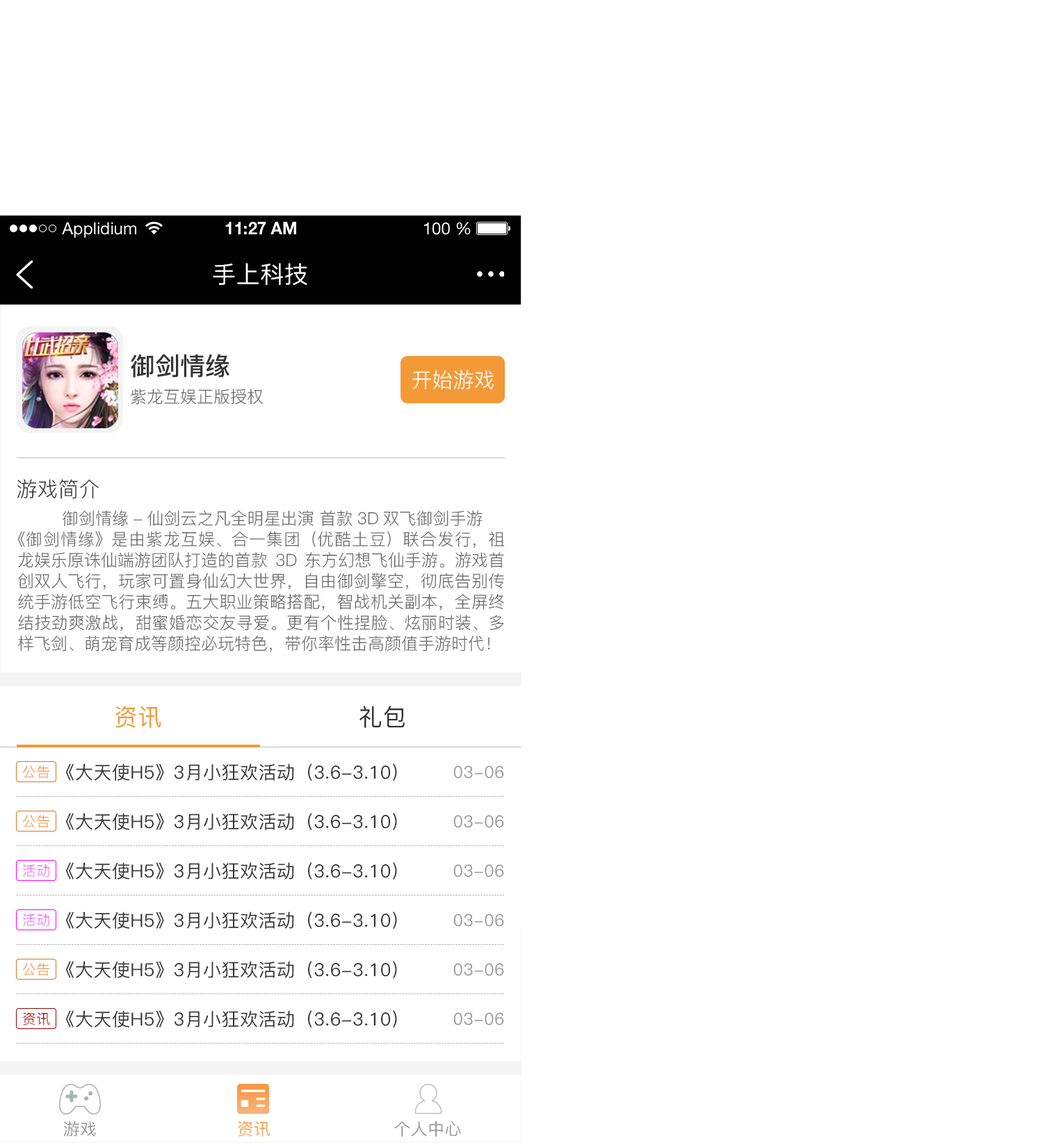
<style>
.page{position:relative;width:1043px;height:1143px;background:#ffffff}
.page>*{position:absolute;margin:0}
.t1{font:16.7px "HelveticaNeueLTStd-Roman";color:#ffffff}
.t2{font:16.7px "HelveticaNeueLTStd-Bd";color:#ffffff}
.t3{font:23.6px "PingFang-SC-Medium";letter-spacing:0.02em;color:#ffffff}
.t4{font:25px "PingFang-SC-Bold";color:#333333}
.t5{font:20.9px "PingFang-SC-Regular";color:#fefefe}
.t6{font:16.7px "PingFang-SC-Regular";color:#666666}
.t7{font:20.9px "PingFang-SC-Regular";color:#333333}
.t8{font:16.7px/20.9px "PingFang-SC-Regular";color:#666666}
.t9{font:23.6px "PingFang-SC-Medium";letter-spacing:0.02em;color:#f39a36}
.t10{font:23.6px "PingFang-SC-Medium";letter-spacing:0.02em;color:#333333}
.t11{font:13.9px "PingFang-SC-Medium";letter-spacing:0.02em;color:#f8a157}
.t12{font:18.1px "PingFang-SC-Medium";letter-spacing:0.02em;color:#333333}
.t13{font:16.7px "PingFang-SC-Medium";letter-spacing:0.02em;color:#999999}
.t14{font:13.9px "PingFang-SC-Medium";letter-spacing:0.02em}
.t15{font:16.7px "PingFang-SC-Medium";letter-spacing:0.02em;color:#f8a45c}
</style>
<div class="page">
<p class="t1" style="left:62px;top:222px;width:74px;height:16px">Applidium</p>
<p class="t2" style="left:225px;top:222px;width:71px;height:12px">11:27 AM</p>
<p class="t1" style="left:424px;top:222px;width:47px;height:13px">100 %</p>
<p class="t3" style="left:213px;top:263px;width:94px;height:22px">手上科技</p>
<p class="t4" style="left:131px;top:354px;width:98px;height:24px">御剑情缘</p>
<p class="t5" style="left:412px;top:370px;width:82px;height:20px">开始游戏</p>
<p class="t6" style="left:131px;top:389px;width:132px;height:16px">紫龙互娱正版授权</p>
<p class="t7" style="left:17px;top:479px;width:82px;height:20px">游戏简介</p>
<p class="t8" style="left:17px;top:510px;width:487px;height:142px">御剑情缘-仙剑云之凡全明星出演 首款3D双飞御剑手游<br>《御剑情缘》是由紫龙互娱、合一集团（优酷土豆）联合发行，祖龙娱乐原诛仙端游团队打造的首款3D东方幻想飞仙手游。游戏首创双人飞行，玩家可置身仙幻大世界，自由御剑擎空，彻底告别传统手游低空飞行束缚。五大职业策略搭配，智战机关副本，全屏终结技劲爽激战，甜蜜婚恋交友寻爱。更有个性捏脸、炫丽时装、多样飞剑、萌宠育成等颜控必玩特色，带你率性击高颜值手游时代！</p>
<p class="t9" style="left:115px;top:706px;width:46px;height:22px">资讯</p>
<p class="t10" style="left:360px;top:706px;width:45px;height:22px">礼包</p>
<p class="t11" style="left:22px;top:766px;width:28px;height:13px">公告</p>
<p class="t12" style="left:65px;top:764px;width:332px;height:17px">《大天使H5》3月小狂欢活动（3.6-3.10）</p>
<p class="t13" style="left:453px;top:766px;width:51px;height:13px">03-06</p>
<p class="t11" style="left:22px;top:815px;width:28px;height:13px">公告</p>
<p class="t12" style="left:65px;top:813px;width:332px;height:17px">《大天使H5》3月小狂欢活动（3.6-3.10）</p>
<p class="t13" style="left:453px;top:815px;width:51px;height:13px">03-06</p>
<p class="t14" style="left:23px;top:864px;width:26px;height:14px">活动</p>
<p class="t12" style="left:65px;top:862px;width:332px;height:18px">《大天使H5》3月小狂欢活动（3.6-3.10）</p>
<p class="t13" style="left:453px;top:864px;width:51px;height:14px">03-06</p>
<p class="t14" style="left:23px;top:914px;width:26px;height:13px">活动</p>
<p class="t12" style="left:65px;top:912px;width:332px;height:17px">《大天使H5》3月小狂欢活动（3.6-3.10）</p>
<p class="t13" style="left:453px;top:914px;width:51px;height:13px">03-06</p>
<p class="t11" style="left:22px;top:963px;width:28px;height:13px">公告</p>
<p class="t12" style="left:65px;top:961px;width:332px;height:17px">《大天使H5》3月小狂欢活动（3.6-3.10）</p>
<p class="t13" style="left:453px;top:963px;width:51px;height:13px">03-06</p>
<p class="t14" style="left:23px;top:1012px;width:27px;height:14px">资讯</p>
<p class="t12" style="left:65px;top:1010px;width:332px;height:18px">《大天使H5》3月小狂欢活动（3.6-3.10）</p>
<p class="t13" style="left:453px;top:1012px;width:51px;height:14px">03-06</p>
<p class="t13" style="left:63px;top:1121px;width:33px;height:16px">游戏</p>
<p class="t15" style="left:238px;top:1121px;width:33px;height:16px">资讯</p>
<p class="t13" style="left:394px;top:1121px;width:67px;height:16px">个人中心</p>
</div>
